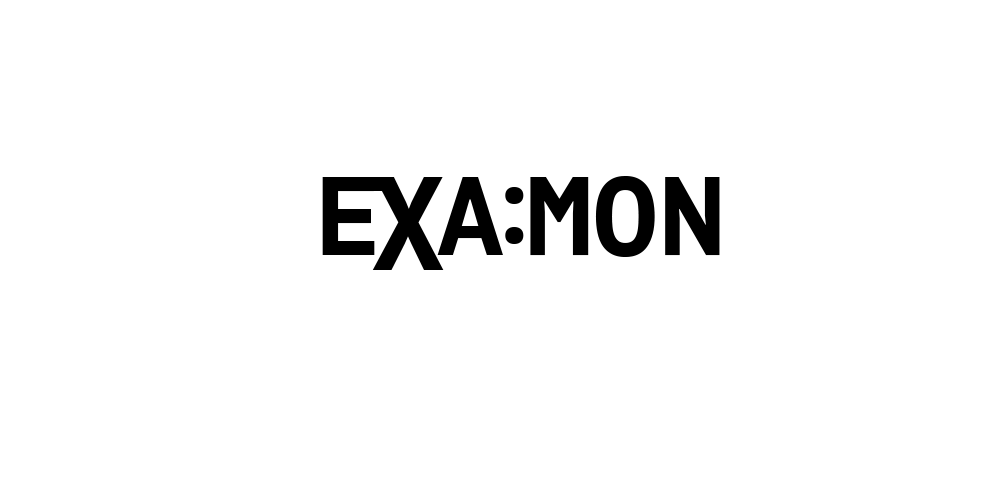
<style>
.page{position:relative;width:1000px;height:500px;background:#ffffff}
.page>*{position:absolute;margin:0}
.t1{font:110.6px "PTMono-Bold";color:#000000}
.t2{font:110.6px "PTMono-Bold";letter-spacing:-0.08em;color:#000000}
.t3{font:132.7px "PTMono-Bold";letter-spacing:-0.06em;color:#000000;scale:0.9 1}
.t4{font:110.6px "PTMono-Bold";letter-spacing:-0.2em;color:#000000}
</style>
<div class="page">
<p class="t1" style="left:322px;top:176px;width:398px;height:94px"><span class="t2">E</span><span class="t3">X</span><span class="t4">A:</span>MON</p>
</div>
